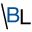
<style>
.page{position:relative;width:32px;height:32px;background:#ffffff}
.page>*{position:absolute;margin:0}
.t1{font:34.3px "HelveticaNeue";color:#000000;scale:0.61 1}
.t2{font:21px "HelveticaNeue";color:#025097}
.t3{font:21px "HelveticaNeue";color:#010101}
</style>
<div class="page">
<p class="t1" style="left:1px;top:3px;width:7px;height:27px;rotate:1deg">\</p>
<p class="t2" style="left:7px;top:7px;width:13px;height:16px">B</p>
<p class="t3" style="left:20px;top:9px;width:11px;height:16px">L</p>
</div>
